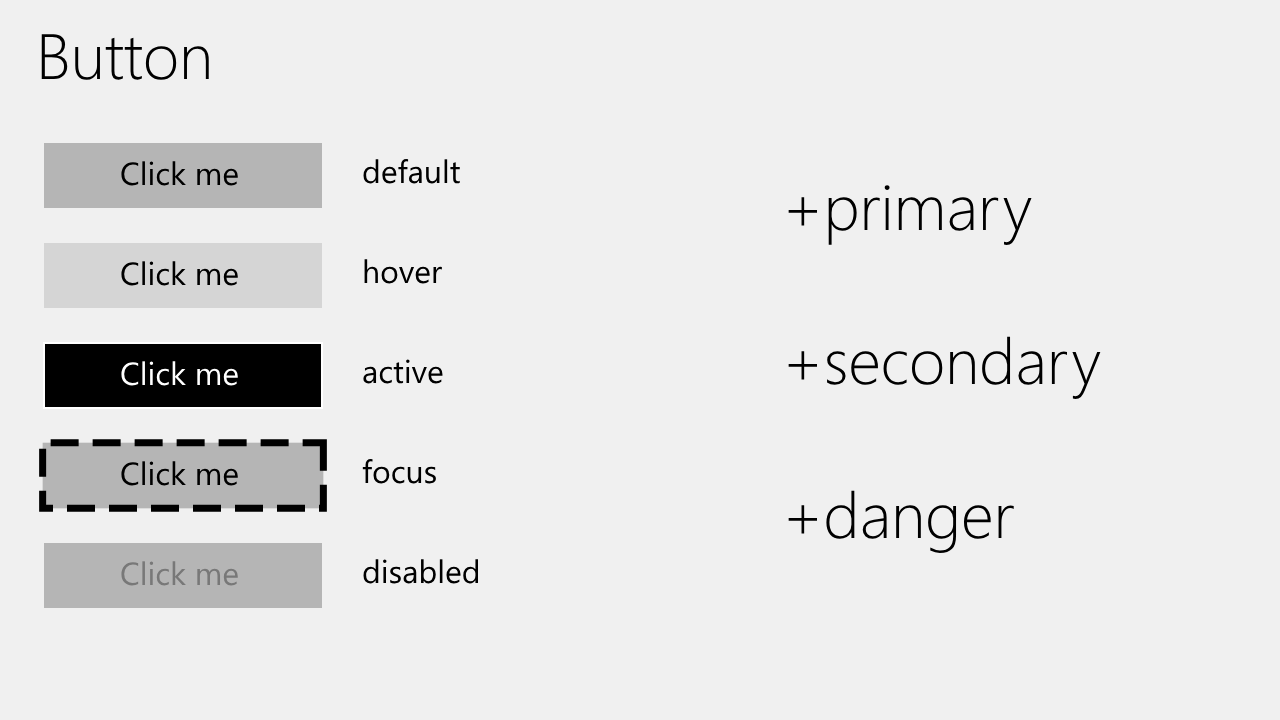
<style>
.page{position:relative;width:1280px;height:720px;background:#f0f0f0}
.page>*{position:absolute;margin:0}
.t1{font:64px "SegoeUI-Light";color:#000000}
.t2{font:32px "SegoeUI";color:#000000}
.t3{font:32px "SegoeUI";color:#ffffff}
.t4{font:32px "SegoeUI";color:#787878}
</style>
<div class="page">
<p class="t1" style="left:41px;top:34px;width:168px;height:46px">Button</p>
<p class="t2" style="left:121px;top:161px;width:117px;height:25px">Click me</p>
<p class="t2" style="left:363px;top:158px;width:97px;height:26px">default</p>
<p class="t1" style="left:788px;top:185px;width:313px;height:369px">+primary<br><br>+secondary<br><br>+danger</p>
<p class="t2" style="left:121px;top:261px;width:117px;height:25px">Click me</p>
<p class="t2" style="left:364px;top:259px;width:78px;height:25px">hover</p>
<p class="t3" style="left:121px;top:361px;width:117px;height:25px">Click me</p>
<p class="t2" style="left:363px;top:359px;width:80px;height:25px">active</p>
<p class="t2" style="left:121px;top:461px;width:117px;height:25px">Click me</p>
<p class="t2" style="left:362px;top:458px;width:74px;height:26px">focus</p>
<p class="t4" style="left:121px;top:561px;width:117px;height:25px">Click me</p>
<p class="t2" style="left:363px;top:559px;width:115px;height:25px">disabled</p>
</div>
